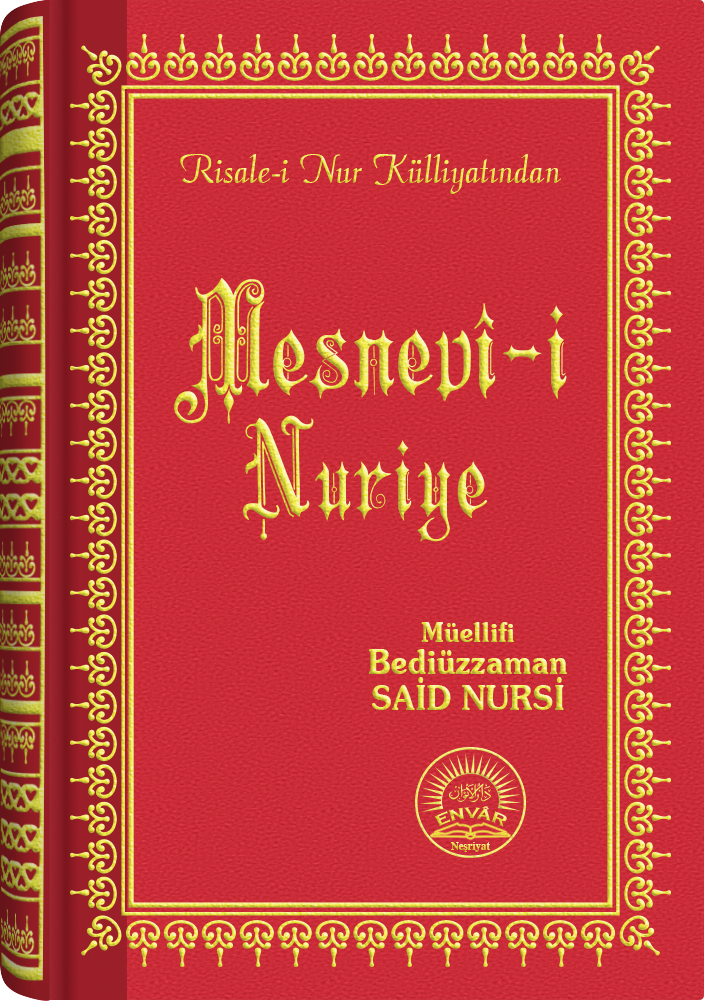
<style>
.page{position:relative;width:704px;height:1001px}
.page>*{position:absolute;margin:0}
.t1{font:45.3px "Barla © 072 Aria ScriptScriptSSi";scale:0.94 1}
.t2{font:148.9px "Barla © 001 Liva Nur";letter-spacing:-0.001em;scale:0.93 1}
.t3{font:127.8px "Barla © 001 Liva Nur";letter-spacing:-0.001em;scale:0.93 1}
.t4{font:33.4px/32.4px "SouvenirITCbyBT-Demi";scale:0.93 1}
.t5{font:27.4px/24.4px "SouvenirITCbyBT-Demi";scale:0.93 1}
.t6{font:33.4px/36.4px "SouvenirITCbyBT-Demi";scale:0.93 1}
.t7{font:15.6px "CopperplateGothic-Bold"}
.t8{font:11.2px "Times-Bold";scale:0.96 1}
</style>
<div class="page">
<p class="t1" style="left:180px;top:154px;width:381px;height:40px">Risale-i Nur Külliyatından</p>
<p class="t2" style="left:174px;top:277px;width:393px;height:147px">Mesnevî-i</p>
<p class="t3" style="left:242px;top:415px;width:246px;height:127px">Nuriye</p>
<p class="t4" style="left:369px;top:622px;width:198px;height:88px;text-align:center"><span class="t5">Müellifi<br></span>Bediüzzaman<br><span class="t6">SAİD NURSİ</span></p>
<p class="t7" style="left:434px;top:806px;width:73px;height:21px">ENVÂR</p>
<p class="t8" style="left:451px;top:842px;width:39px;height:10px">Neşriyat</p>
</div>
